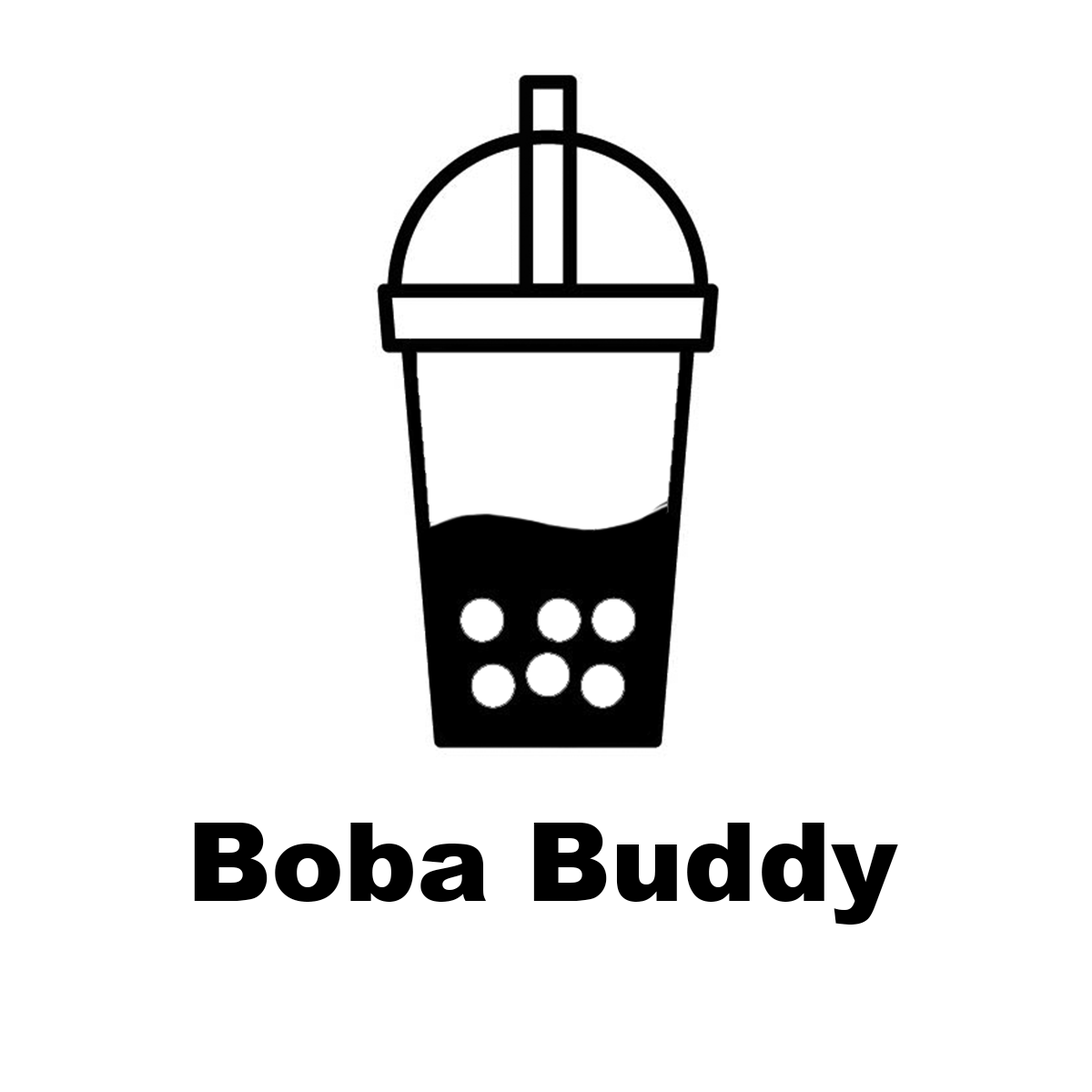
<style>
.page{position:relative;width:1092px;height:1092px;background:#ffffff}
.page>*{position:absolute;margin:0}
.t1{font:109.2px "Arial-Black";color:#000000}
</style>
<div class="page">
<p class="t1" style="left:194px;top:823px;width:704px;height:102px">Boba Buddy</p>
</div>
